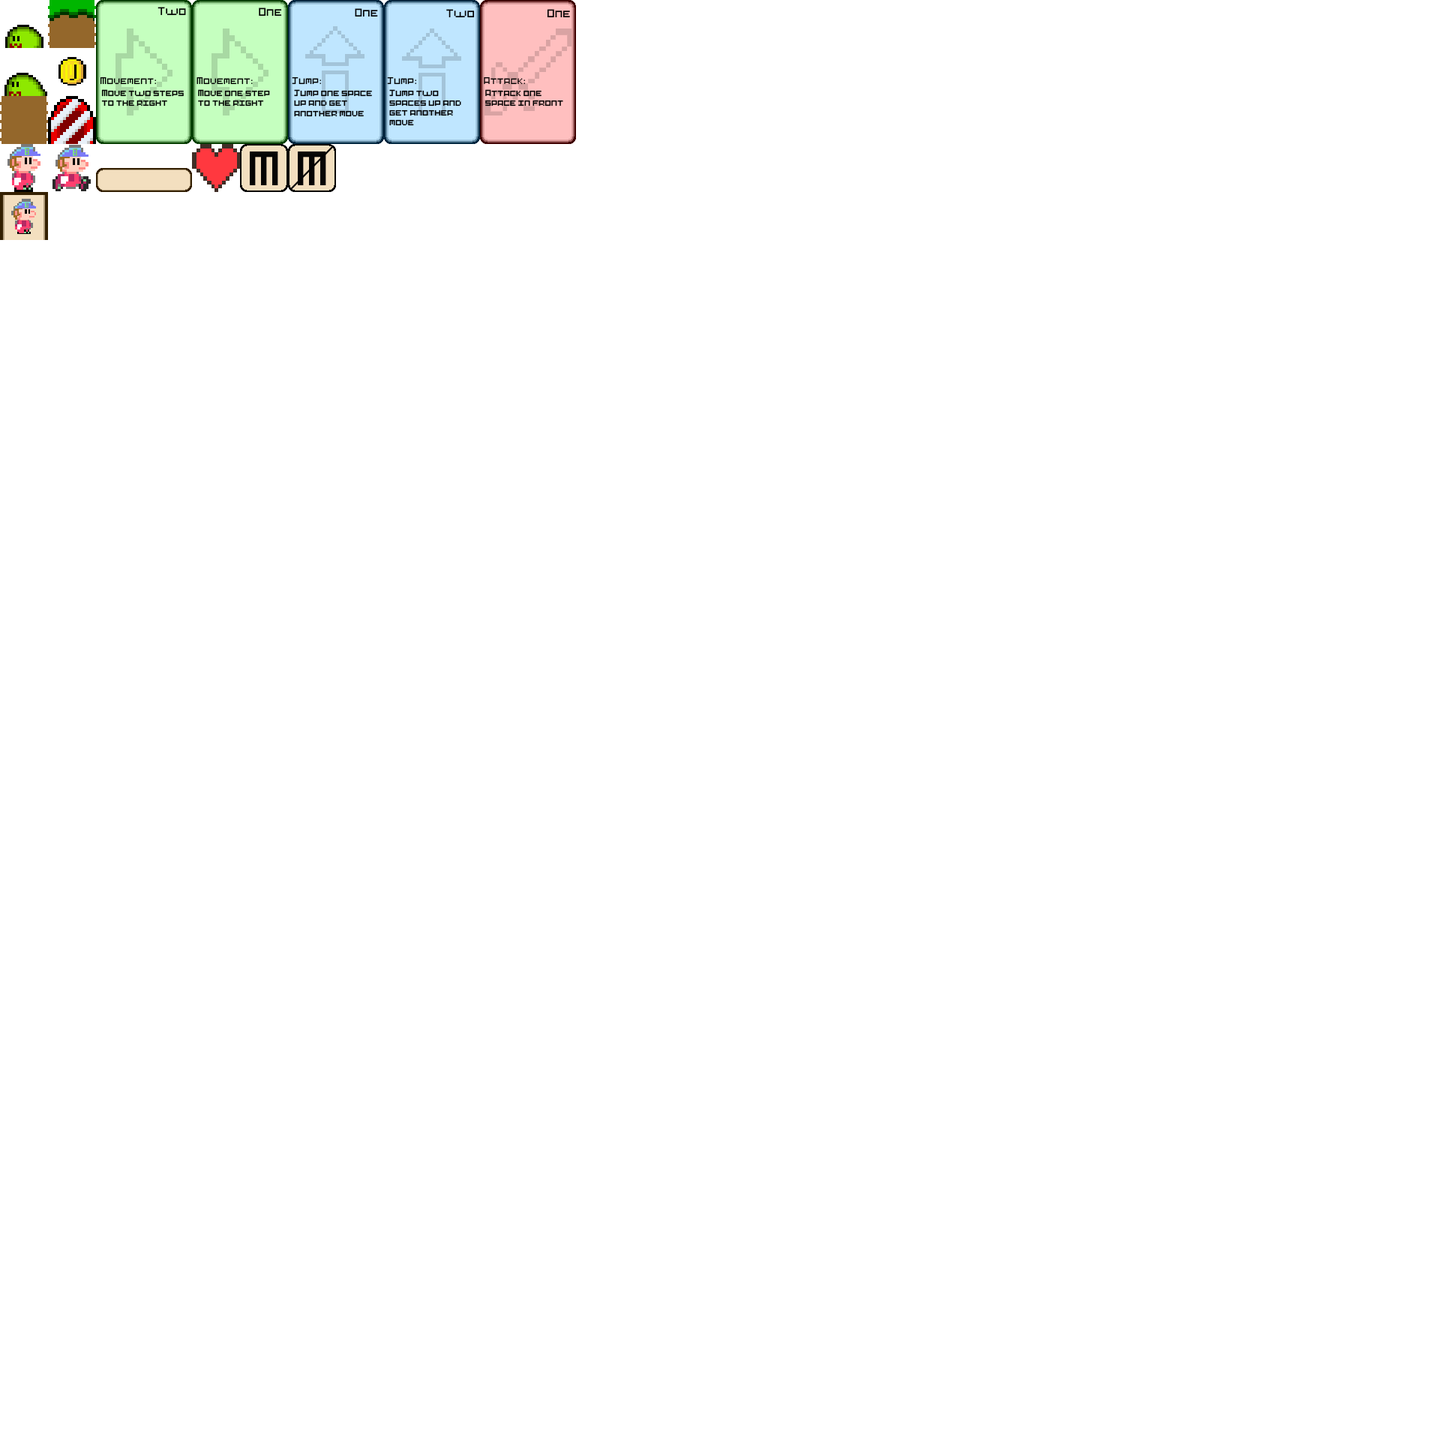
<style>
.page{position:relative;width:1440px;height:1440px;background:#ffffff}
.page>*{position:absolute;margin:0}
.t1{font:10.5px "Pixel-Art";color:#000000}
.t2{font:9px "Pixel-Art";color:#000000}
.t3{font:9px "MyriadPro-Regular";color:#000000}
.t4{font:8.2px "Pixel-Art";color:#000000}
.t5{font:45px "Pixel-Art";color:#060504}
</style>
<div class="page">
<p class="t1" style="left:158px;top:7px;width:28px;height:9px">Two</p>
<p class="t1" style="left:259px;top:8px;width:23px;height:8px">One</p>
<p class="t1" style="left:355px;top:8px;width:23px;height:9px">One</p>
<p class="t1" style="left:446px;top:9px;width:29px;height:9px">Two</p>
<p class="t1" style="left:547px;top:9px;width:23px;height:9px">One</p>
<p class="t2" style="left:100px;top:76px;width:56px;height:9px">Movement<span class="t3">:</span></p>
<p class="t2" style="left:196px;top:76px;width:57px;height:9px">Movement<span class="t3">:</span></p>
<p class="t2" style="left:292px;top:76px;width:29px;height:9px">Jump<span class="t3">:</span></p>
<p class="t2" style="left:387px;top:76px;width:29px;height:9px">Jump<span class="t3">:</span></p>
<p class="t2" style="left:484px;top:76px;width:41px;height:9px">Attack<span class="t3">:</span></p>
<p class="t4" style="left:101px;top:89px;width:83px;height:17px">Move two steps<br>to the right</p>
<p class="t4" style="left:198px;top:89px;width:72px;height:17px">Move one step<br>to the right</p>
<p class="t4" style="left:294px;top:89px;width:78px;height:28px">Jump one space<br>up and get<br>another move</p>
<p class="t4" style="left:389px;top:89px;width:72px;height:37px">Jump two <br>spaces up and<br>get another<br>move</p>
<p class="t4" style="left:485px;top:89px;width:78px;height:17px">Attack one<br>space in front</p>
<p class="t5" style="left:250px;top:152px;width:28px;height:33px">M</p>
<p class="t5" style="left:298px;top:152px;width:28px;height:33px">M</p>
</div>
